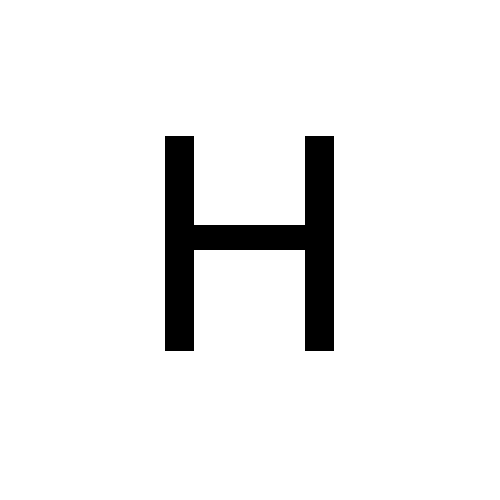
<style>
.page{position:relative;width:500px;height:500px;background:#ffffff}
.page>*{position:absolute;margin:0}
.t1{font:300px "ArialMT";color:#000000}
</style>
<div class="page">
<p class="t1" style="left:165px;top:136px;width:169px;height:215px">H</p>
</div>
